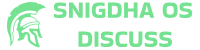
<style>
.page{position:relative;width:200px;height:50px;background:#ffffff}
.page>*{position:absolute;margin:0}
.t1{font:24px "BakbakOne-Regular";color:#74e291}
</style>
<div class="page">
<p class="t1" style="left:53px;top:2px;width:140px;height:45px">SNIGDHA OS<br>DISCUSS</p>
</div>
